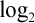
<style>
.page{position:relative;width:35px;height:23px;background:#ffffff}
.page>*{position:absolute;margin:0}
.t1{font:24px "TimesNewRomanPSMT";color:#000000;scale:0.95 1}
</style>
<div class="page">
<p class="t1" style="left:0px;top:0px;width:35px;height:23px">log2</p>
</div>
